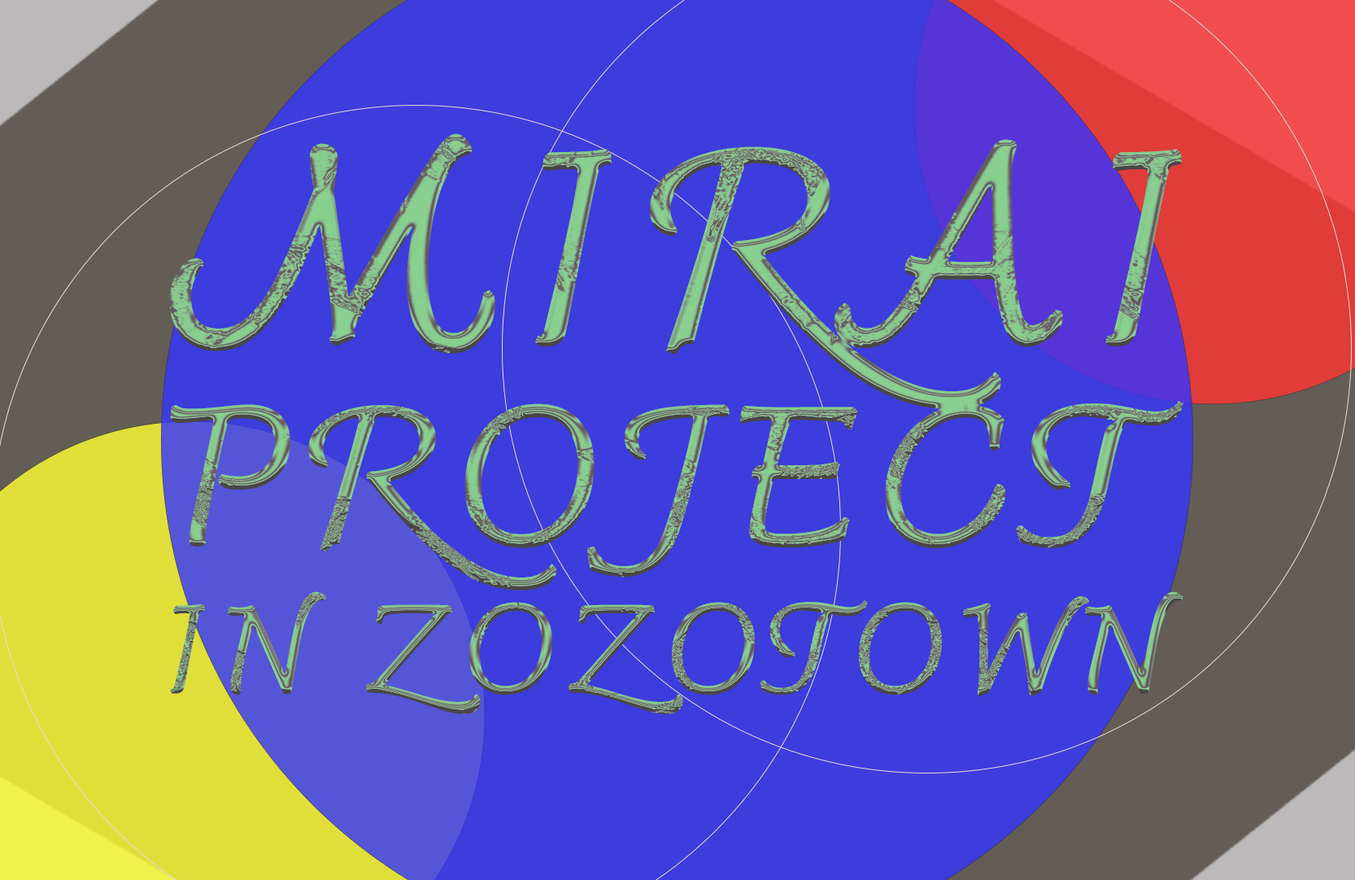
<style>
.page{position:relative;width:1355px;height:880px;background:#3d3cdd}
.page>*{position:absolute;margin:0}
.t1{font:122px "Charmonman-Regular";letter-spacing:0.08em;font-weight:bold;scale:0.95 1}
</style>
<div class="page">
<p class="t1" style="left:169px;top:133px;width:1015px;height:581px;text-align:right">MIRAI<br>PROJECT<br>IN ZOZOTOWN</p>
</div>
